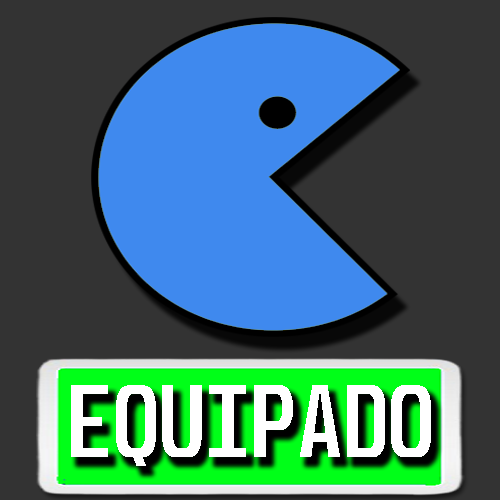
<style>
.page{position:relative;width:500px;height:500px;background:#333333}
.page>*{position:absolute;margin:0}
.t1{font:88.1px "Unispace-Bold";color:#ffffff;scale:0.85 1}
.t2{font:87.7px "Unispace-Bold";color:#ffffff;scale:0.85 1}
</style>
<div class="page">
<p class="t1" style="left:71px;top:385px;width:360px;height:81px">EQUIPA<span class="t2">DO</span></p>
</div>
